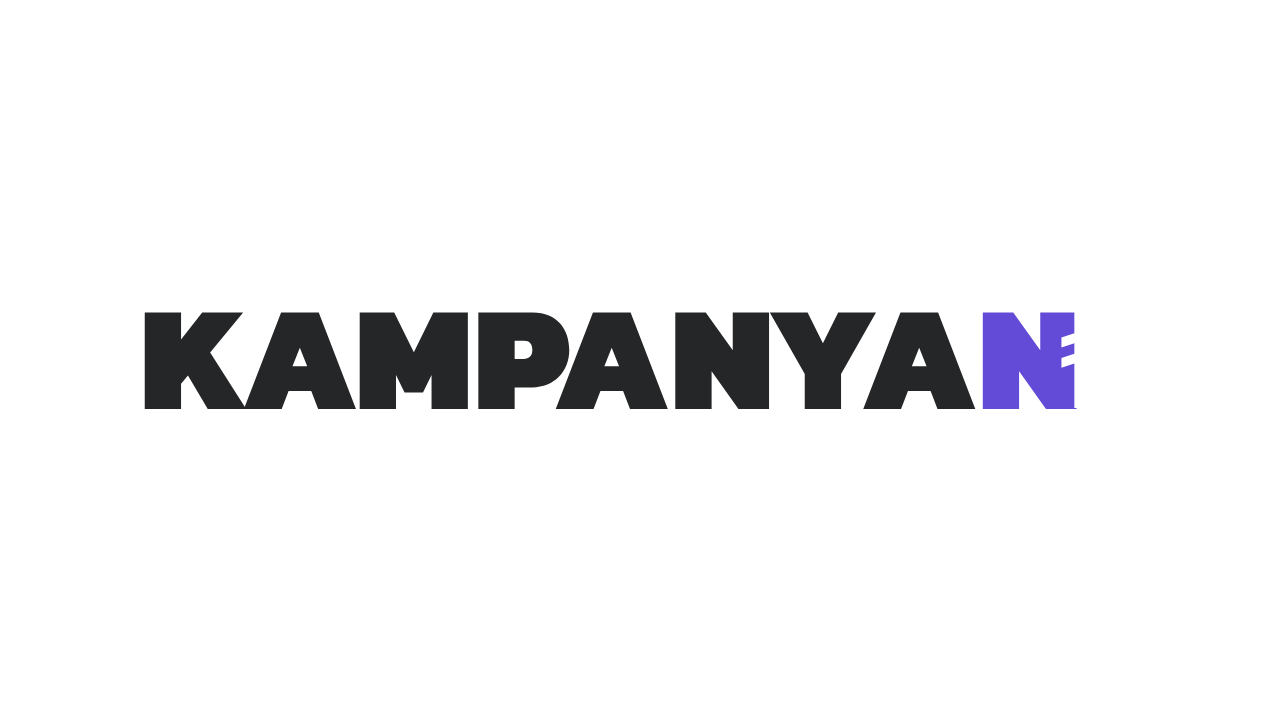
<style>
.page{position:relative;width:1280px;height:720px;background:#ffffff}
.page>*{position:absolute;margin:0}
.t1{font:150px "Kanit-Black";color:#252627}
.t2{font:150px "Kanit-Black";color:#644bd7}
.t3{font:150px "Kanit-Regular";color:#ffffff}
</style>
<div class="page">
<p class="t1" style="left:144px;top:312px;width:933px;height:97px">KAMPANYA<span class="t2">N</span></p>
<p class="t3" style="left:1061px;top:311px;width:75px;height:97px">₺</p>
</div>
